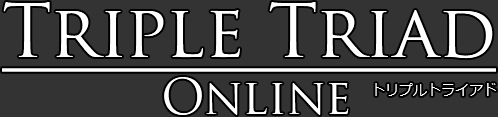
<style>
.page{position:relative;width:498px;height:117px;background:#333333}
.page>*{position:absolute;margin:0}
.t1{font:72px "TrajanPro-Regular";color:#ffffff;text-decoration:underline}
.t2{font:48px "TrajanPro-Regular";color:#ffffff}
.t3{font:14px "Meiryo";color:#ffffff}
</style>
<div class="page">
<p class="t1" style="left:2px;top:2px;width:494px;height:70px">Triple Triad</p>
<p class="t2" style="left:164px;top:77px;width:185px;height:38px">Online</p>
<p class="t3" style="left:375px;top:83px;width:121px;height:13px">トリプルトライアド</p>
</div>
